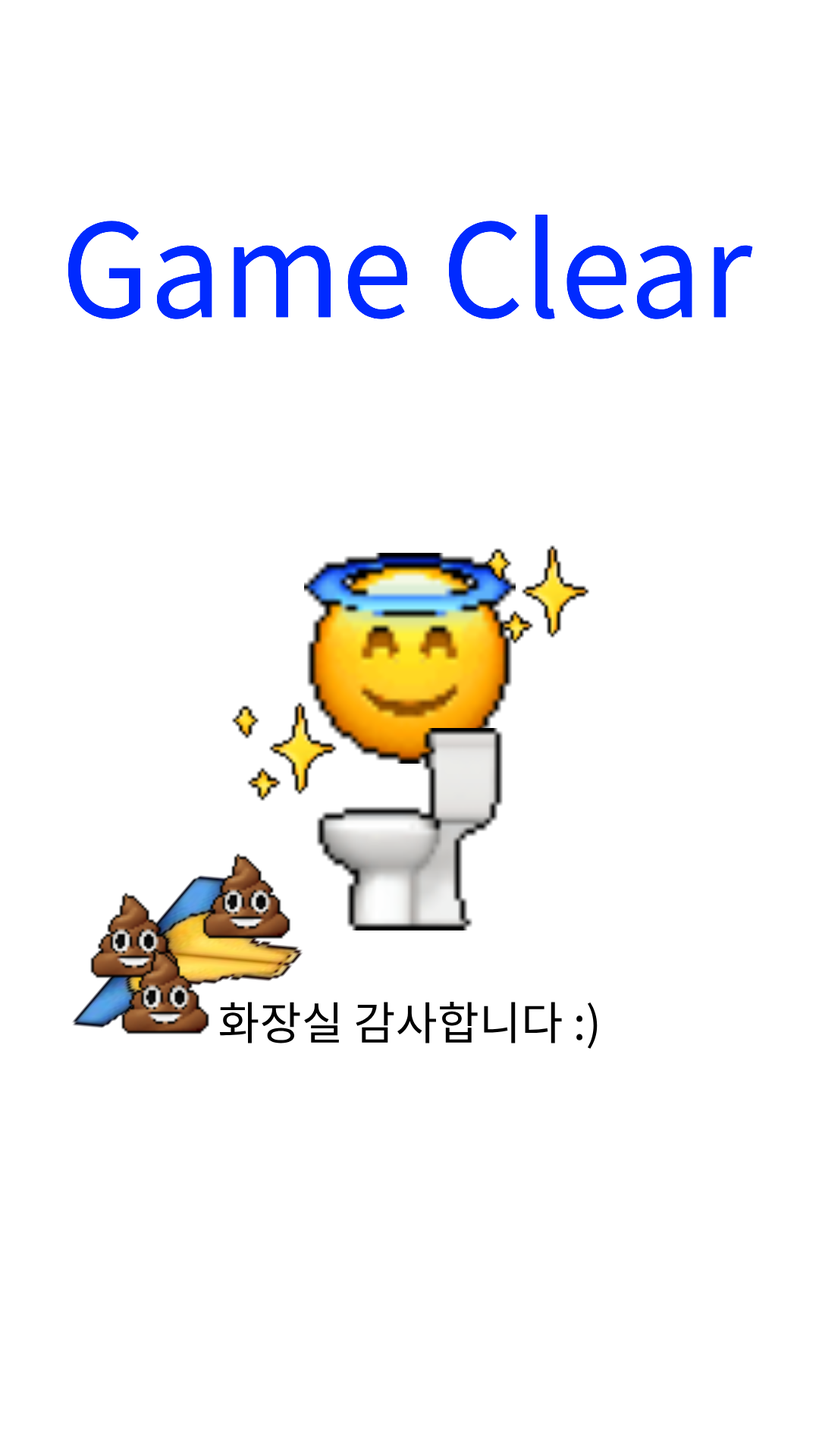
<style>
.page{position:relative;width:819px;height:1456px;background:#ffffff}
.page>*{position:absolute;margin:0}
.t1{font:128.7px "NotoSansKR-Regular";color:#002aff}
.t2{font:45.5px "NotoSansKR-Regular";color:#000000}
</style>
<div class="page">
<p class="t1" style="left:68px;top:215px;width:685px;height:104px">Game Clear</p>
<p class="t2" style="left:219px;top:1002px;width:379px;height:47px">화장실 감사합니다 :)</p>
</div>
